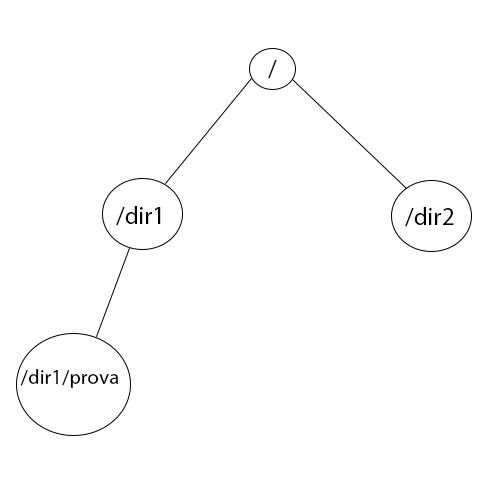
<style>
.page{position:relative;width:500px;height:500px;background:#ffffff}
.page>*{position:absolute;margin:0}
.t1{font:25px "MyriadPro-Regular";color:#000000}
.t2{font:20.8px "MyriadPro-Regular";color:#000000}
</style>
<div class="page">
<p class="t1" style="left:268px;top:60px;width:9px;height:19px">/</p>
<p class="t1" style="left:116px;top:206px;width:45px;height:20px">/dir1</p>
<p class="t1" style="left:405px;top:207px;width:49px;height:20px">/dir2</p>
<p class="t2" style="left:20px;top:369px;width:99px;height:19px">/dir1/prova</p>
</div>
